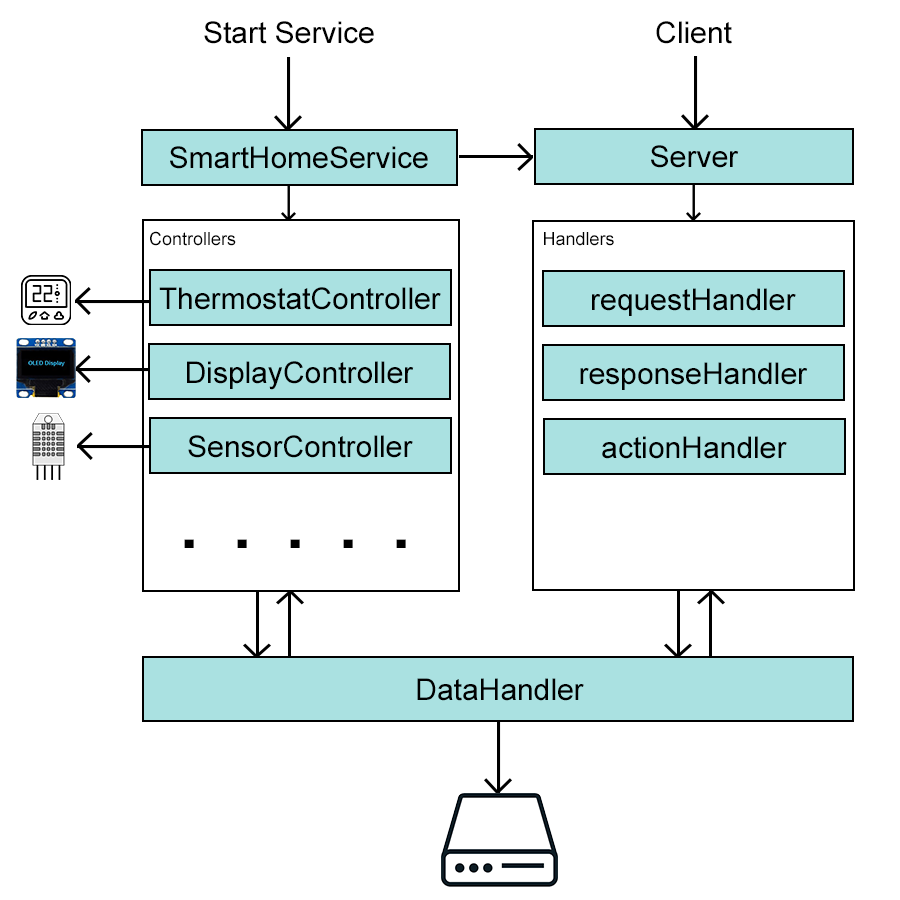
<style>
.page{position:relative;width:900px;height:900px;background:#ffffff}
.page>*{position:absolute;margin:0}
.t1{font:30px "ArialMT";color:#000000}
.t2{font:18px "ArialMT";color:#000000}
.t3{font:87.9px "ArialMT";color:#000000;scale:1.09 1}
</style>
<div class="page">
<p class="t1" style="left:204px;top:21px;width:170px;height:23px">Start Service</p>
<p class="t1" style="left:656px;top:21px;width:76px;height:23px">Client</p>
<p class="t1" style="left:170px;top:146px;width:258px;height:23px">SmartHomeService</p>
<p class="t1" style="left:651px;top:145px;width:88px;height:23px">Server</p>
<p class="t2" style="left:150px;top:231px;width:86px;height:15px">Controllers</p>
<p class="t2" style="left:544px;top:232px;width:70px;height:14px">Handlers</p>
<p class="t1" style="left:159px;top:287px;width:282px;height:23px">ThermostatController</p>
<p class="t1" style="left:592px;top:288px;width:204px;height:28px">requestHandler</p>
<p class="t1" style="left:187px;top:361px;width:227px;height:29px">DisplayController</p>
<p class="t1" style="left:580px;top:362px;width:228px;height:28px">responseHandler</p>
<p class="t1" style="left:188px;top:435px;width:225px;height:23px">SensorController</p>
<p class="t1" style="left:602px;top:436px;width:185px;height:23px">actionHandler</p>
<p class="t3" style="left:184px;top:539px;width:222px;height:9px">. . . . .</p>
<p class="t1" style="left:417px;top:678px;width:167px;height:23px">DataHandler</p>
</div>
